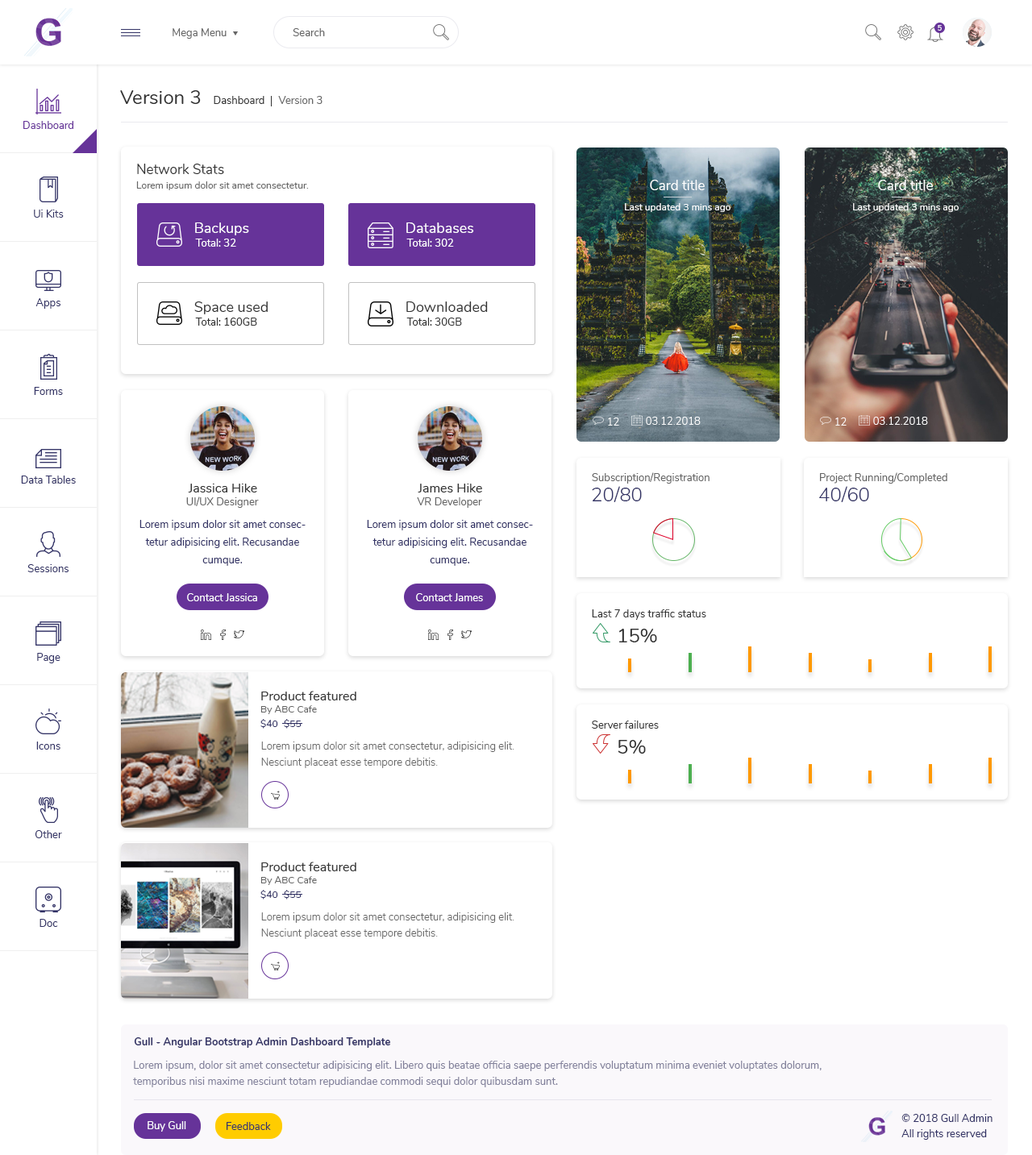
<style>
.page{position:relative;width:1032px;height:1155px;background:#ffffff}
.page>*{position:absolute;margin:0}
.t1{font:10.5px "Nunito-Regular";color:#666666}
.t2{font:7.3px "Nunito-SemiBold";color:#ffffff}
.t3{font:19.4px "Nunito-Regular";color:#333333}
.t4{font:10.5px "Nunito-Regular";color:#333333}
.t5{font:10.5px "Nunito-Regular";color:#663399}
.t6{font:13.7px "Nunito-Regular";color:#333333}
.t7{font:9.7px "Nunito-Regular";color:#666666}
.t8{font:13.7px "Nunito-Regular";color:#ffffff}
.t9{font:10.5px "Nunito-Regular";color:#333366}
.t10{font:9.7px "Nunito-Regular";color:#ffffff}
.t11{font:14.5px "Nunito-Regular";color:#ffffff}
.t12{font:10.5px "Nunito-Regular";color:#ffffff}
.t13{font:14.5px "Nunito-Regular";color:#333333}
.t14{font:10.5px "Nunito-Light";color:#ffffff}
.t15{font:12.9px "Nunito-Regular";color:#333333}
.t16{font:19.4px "Nunito-Light";color:#333366}
.t17{font:10.5px/17.7px "Nunito-Regular";color:#333366}
.t18{font:9.7px "Nunito-Regular";color:#333366}
.t19{font:10.5px/16.1px "Nunito-Light";color:#666666}
.t20{font:10.5px "Nunito-Bold";color:#333366}
.t21{font:10.5px/16.1px "Nunito-Regular";color:#82819b}
</style>
<div class="page">
<p class="t1" style="left:173px;top:28px;width:54px;height:11px">Mega Menu</p>
<p class="t1" style="left:293px;top:28px;width:32px;height:8px">Search</p>
<p class="t2" style="left:938px;top:25px;width:4px;height:6px">5</p>
<p class="t3" style="left:120px;top:90px;width:81px;height:14px">Version 3</p>
<p class="t4" style="left:214px;top:96px;width:50px;height:8px">Dashboard</p>
<p class="t1" style="left:278px;top:96px;width:45px;height:8px">Version 3</p>
<p class="t5" style="left:23px;top:121px;width:50px;height:8px">Dashboard</p>
<p class="t6" style="left:137px;top:164px;width:87px;height:10px">Network Stats</p>
<p class="t7" style="left:136px;top:181px;width:173px;height:9px">Lorem ipsum dolor sit amet consectetur.</p>
<p class="t8" style="left:650px;top:180px;width:55px;height:10px">Card title</p>
<p class="t8" style="left:878px;top:180px;width:55px;height:10px">Card title</p>
<p class="t9" style="left:34px;top:210px;width:30px;height:8px">Ui Kits</p>
<p class="t10" style="left:625px;top:203px;width:105px;height:9px">Last updated 3 mins ago</p>
<p class="t10" style="left:853px;top:203px;width:106px;height:9px">Last updated 3 mins ago</p>
<p class="t11" style="left:195px;top:223px;width:54px;height:12px">Backups</p>
<p class="t11" style="left:406px;top:223px;width:68px;height:10px">Databases</p>
<p class="t12" style="left:195px;top:239px;width:41px;height:8px">Total: 32</p>
<p class="t12" style="left:406px;top:239px;width:48px;height:8px">Total: 302</p>
<p class="t9" style="left:35px;top:298px;width:25px;height:11px">Apps</p>
<p class="t13" style="left:194px;top:302px;width:74px;height:12px">Space used</p>
<p class="t13" style="left:406px;top:302px;width:82px;height:10px">Downloaded</p>
<p class="t4" style="left:195px;top:318px;width:62px;height:8px">Total: 160GB</p>
<p class="t4" style="left:406px;top:318px;width:56px;height:8px">Total: 30GB</p>
<p class="t9" style="left:34px;top:387px;width:29px;height:8px">Forms</p>
<p class="t14" style="left:608px;top:418px;width:11px;height:8px">12</p>
<p class="t14" style="left:646px;top:417px;width:55px;height:8px">03.12.2018</p>
<p class="t14" style="left:835px;top:418px;width:12px;height:8px">12</p>
<p class="t14" style="left:873px;top:417px;width:55px;height:8px">03.12.2018</p>
<p class="t1" style="left:592px;top:472px;width:118px;height:12px">Subscription/Registration</p>
<p class="t1" style="left:820px;top:472px;width:127px;height:12px">Project Running/Completed</p>
<p class="t9" style="left:21px;top:476px;width:55px;height:8px">Data Tables</p>
<p class="t15" style="left:188px;top:484px;width:69px;height:9px">Jassica Hike</p>
<p class="t15" style="left:418px;top:484px;width:64px;height:9px">James Hike</p>
<p class="t1" style="left:186px;top:497px;width:73px;height:11px">UI/UX Designer</p>
<p class="t1" style="left:417px;top:497px;width:65px;height:11px">VR Developer</p>
<p class="t16" style="left:592px;top:486px;width:50px;height:16px">20/80</p>
<p class="t16" style="left:819px;top:486px;width:50px;height:16px">40/60</p>
<p class="t17" style="left:139px;top:520px;width:167px;height:46px;text-align:center">Lorem ipsum dolor sit amet consectetur adipisicing elit. Recusandae cumque.</p>
<p class="t17" style="left:367px;top:520px;width:166px;height:46px;text-align:center">Lorem ipsum dolor sit amet consectetur adipisicing elit. Recusandae cumque.</p>
<p class="t9" style="left:27px;top:564px;width:42px;height:8px">Sessions</p>
<p class="t12" style="left:187px;top:593px;width:70px;height:8px">Contact Jassica</p>
<p class="t12" style="left:416px;top:593px;width:67px;height:8px">Contact James</p>
<p class="t4" style="left:592px;top:610px;width:114px;height:10px">Last 7 days traffic status</p>
<p class="t3" style="left:619px;top:629px;width:38px;height:14px">15%</p>
<p class="t9" style="left:37px;top:653px;width:23px;height:11px">Page</p>
<p class="t15" style="left:261px;top:691px;width:95px;height:10px">Product featured</p>
<p class="t7" style="left:260px;top:705px;width:57px;height:9px">By ABC Cafe</p>
<p class="t18" style="left:260px;top:719px;width:18px;height:10px">$40</p>
<p class="t18" style="left:284px;top:719px;width:18px;height:10px">$55</p>
<p class="t4" style="left:592px;top:721px;width:67px;height:8px">Server failures</p>
<p class="t9" style="left:36px;top:742px;width:24px;height:8px">Icons</p>
<p class="t19" style="left:261px;top:742px;width:253px;height:26px">Lorem ipsum dolor sit amet consectetur, adipisicing elit. Nesciunt placeat esse tempore debitis.</p>
<p class="t3" style="left:618px;top:740px;width:28px;height:14px">5%</p>
<p class="t9" style="left:35px;top:830px;width:27px;height:9px">Other</p>
<p class="t15" style="left:261px;top:862px;width:95px;height:10px">Product featured</p>
<p class="t7" style="left:260px;top:876px;width:57px;height:9px">By ABC Cafe</p>
<p class="t18" style="left:260px;top:890px;width:18px;height:10px">$40</p>
<p class="t18" style="left:284px;top:890px;width:18px;height:10px">$55</p>
<p class="t19" style="left:261px;top:913px;width:253px;height:26px">Lorem ipsum dolor sit amet consectetur, adipisicing elit. Nesciunt placeat esse tempore debitis.</p>
<p class="t9" style="left:40px;top:919px;width:18px;height:8px">Doc</p>
<p class="t20" style="left:134px;top:1038px;width:256px;height:10px">Gull - Angular Bootstrap Admin Dashboard Template</p>
<p class="t21" style="left:133px;top:1061px;width:689px;height:27px">Lorem ipsum, dolor sit amet consectetur adipisicing elit. Libero quis beatae officia saepe perferendis voluptatum minima eveniet voluptates dolorum, <br>temporibus nisi maxime nesciunt totam repudiandae commodi sequi dolor quibusdam sunt.</p>
<p class="t12" style="left:148px;top:1122px;width:38px;height:10px">Buy Gull</p>
<p class="t9" style="left:901px;top:1114px;width:92px;height:8px">© 2018 Gull Admin</p>
<p class="t9" style="left:227px;top:1122px;width:44px;height:8px">Feedback</p>
<p class="t9" style="left:901px;top:1130px;width:86px;height:10px">All rights reserved</p>
</div>
